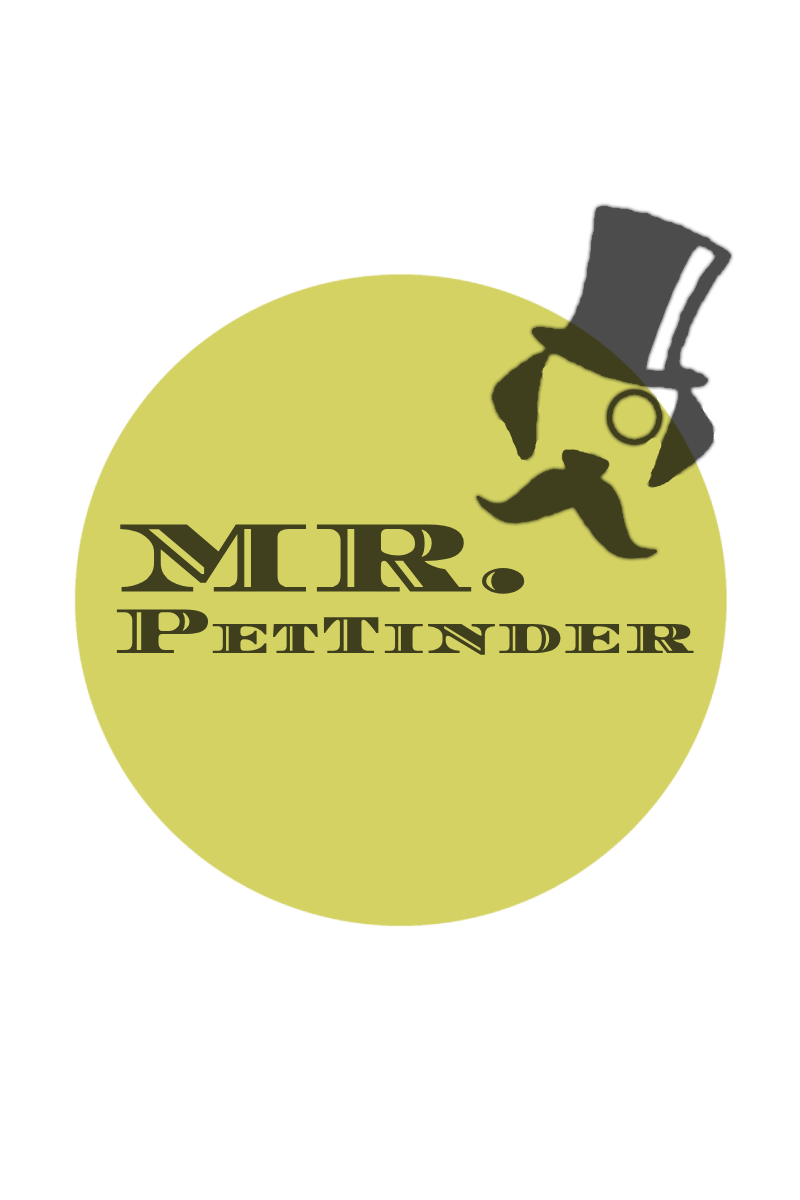
<style>
.page{position:relative;width:800px;height:1200px;background:#ffffff}
.page>*{position:absolute;margin:0}
.t1{font:103px "DiplomataSC-Regular";color:#40401f}
.t2{font:52px "DiplomataSC-Regular";color:#3f3e1d}
.t3{font:67px "DiplomataSC-Regular";color:#3f3e1d}
.t4{font:55px "DiplomataSC-Regular";color:#3f3e1d}
</style>
<div class="page">
<p class="t1" style="left:120px;top:524px;width:405px;height:70px">MR.</p>
<p class="t2" style="left:116px;top:609px;width:578px;height:46px"><span class="t3">P</span>et<span class="t4">T</span>inder</p>
</div>
